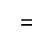
<style>
.page{position:relative;width:53px;height:41px;background:#ffffff}
.page>*{position:absolute;margin:0}
.t1{font:23.7px "DroidSans";color:#000000}
</style>
<div class="page">
<p class="t1" style="left:21px;top:19px;width:11px;height:7px">=</p>
</div>
